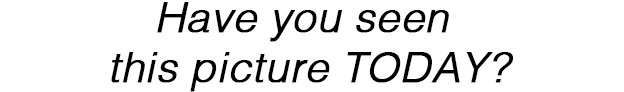
<style>
.page{position:relative;width:624px;height:92px;background:#ffffff}
.page>*{position:absolute;margin:0}
.t1{font:42px "Helvetica-LightOblique";color:#000000;font-weight:bold}
</style>
<div class="page">
<p class="t1" style="left:111px;top:2px;width:403px;height:90px;text-align:center">Have you seen <br>this picture TODAY?</p>
</div>
